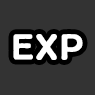
<style>
.page{position:relative;width:95px;height:95px;background:#333333}
.page>*{position:absolute;margin:0}
.t1{font:36px "HaanBaekjeB";color:#ffffff;font-weight:bold}
</style>
<div class="page">
<p class="t1" style="left:13px;top:34px;width:70px;height:26px">EXP</p>
</div>
